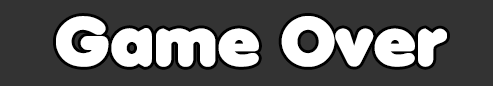
<style>
.page{position:relative;width:493px;height:86px;background:#333333}
.page>*{position:absolute;margin:0}
.t1{font:69.1px "Debussy";color:#ffffff}
</style>
<div class="page">
<p class="t1" style="left:56px;top:16px;width:391px;height:51px">Game Over</p>
</div>
